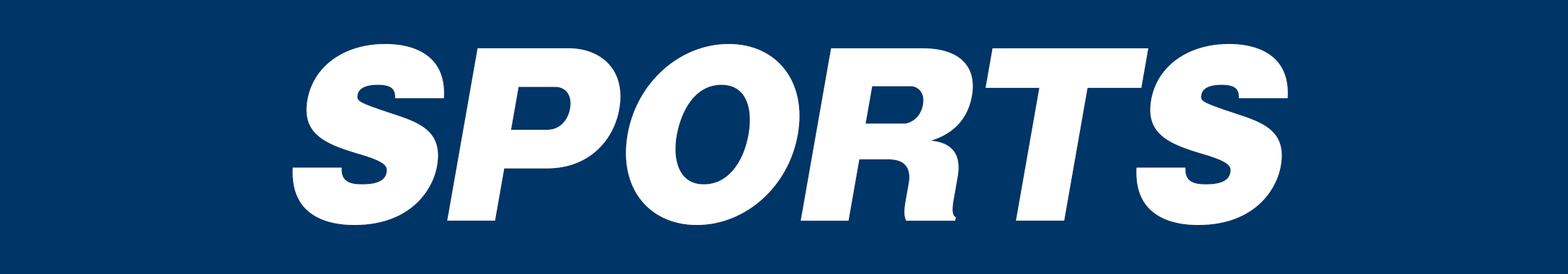
<style>
.page{position:relative;width:1568px;height:274px;background:#003567}
.page>*{position:absolute;margin:0}
.t1{font:210px "GothicMB101Pro-Ultra";color:#ffffff;font-style:italic}
</style>
<div class="page">
<p class="t1" style="left:292px;top:44px;width:996px;height:181px">SPORTS</p>
</div>
